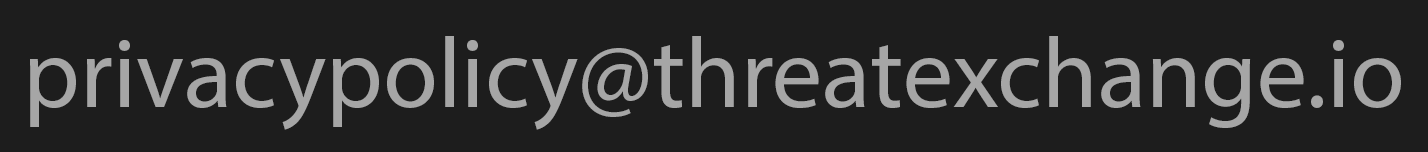
<style>
.page{position:relative;width:1428px;height:152px;background:#1d1d1d}
.page>*{position:absolute;margin:0}
.t1{font:100px "MyriadPro-Regular";color:#a6a6a6}
</style>
<div class="page">
<p class="t1" style="left:30px;top:36px;width:1371px;height:94px">privacypolicy@threatexchange.io</p>
</div>
